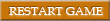
<style>
.page{position:relative;width:110px;height:21px;background:#c77408}
.page>*{position:absolute;margin:0}
.t1{font:12px "BookAntiqua";color:#ffffff}
</style>
<div class="page">
<p class="t1" style="left:9px;top:7px;width:94px;height:8px">RESTART GAME</p>
</div>
